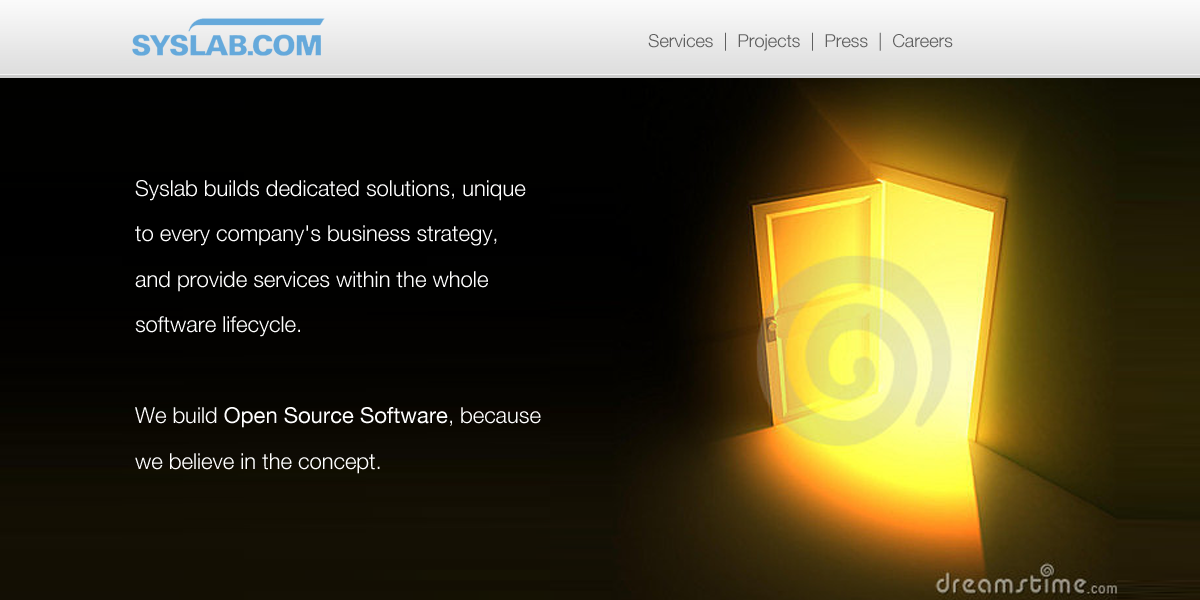
<style>
.page{position:relative;width:1200px;height:600px}
.page>*{position:absolute;margin:0}
.t1{font:18px "HelveticaNeue-Light";color:#606060}
.t2{font:22px/45.5px "HelveticaNeue-Light";color:#ffffff}
.t3{font:22px/45.5px "HelveticaNeue";color:#ffffff}
</style>
<div class="page">
<p class="t1" style="left:648px;top:32px;width:305px;height:19px">Services  |  Projects  |  Press  |  Careers</p>
<p class="t2" style="left:135px;top:180px;width:406px;height:294px">Syslab builds dedicated solutions, unique<br>to every company's business strategy,<br>and provide services within the whole <br>software lifecycle.<br><br>We build <span class="t3">Open Source Software</span>, because<br>we believe in the concept.</p>
</div>
